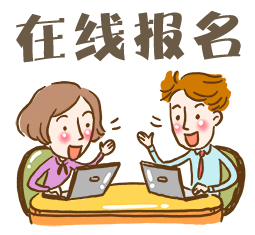
<style>
.page{position:relative;width:255px;height:235px;background:#ffffff}
.page>*{position:absolute;margin:0}
.t1{font:56.1px "Jade2B";letter-spacing:0.05em;color:#6a5a46}
</style>
<div class="page">
<p class="t1" style="left:16px;top:10px;width:225px;height:53px;rotate:-1deg">在线报名</p>
</div>
